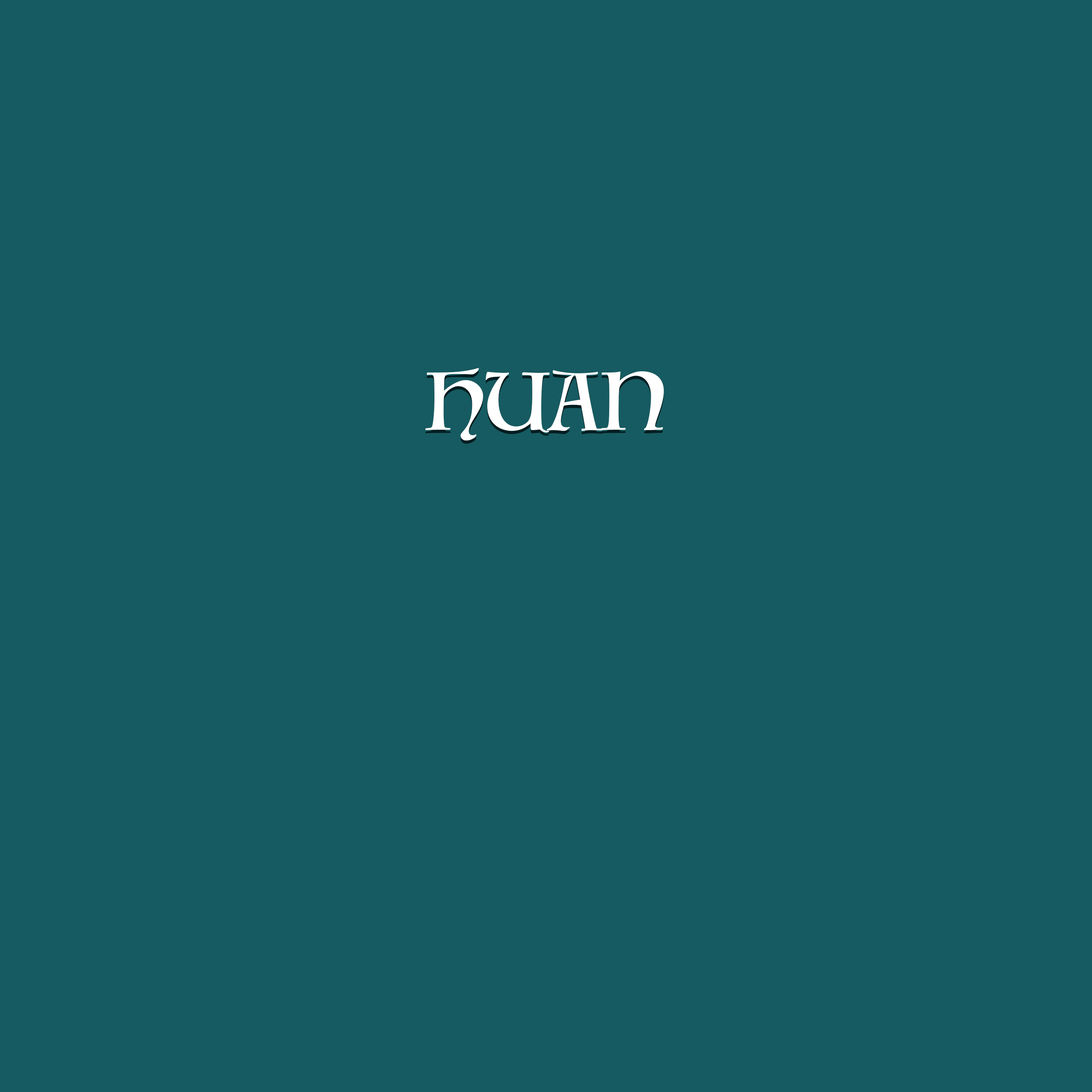
<style>
.page{position:relative;width:1092px;height:1092px;background:#165b61}
.page>*{position:absolute;margin:0}
.t1{font:79.9px "Luminari-Regular";color:#ffffff}
</style>
<div class="page">
<p class="t1" style="left:425px;top:371px;width:239px;height:73px">HUAN</p>
<p class="t1" style="left:425px;top:368px;width:239px;height:72px">HUAN</p>
</div>
